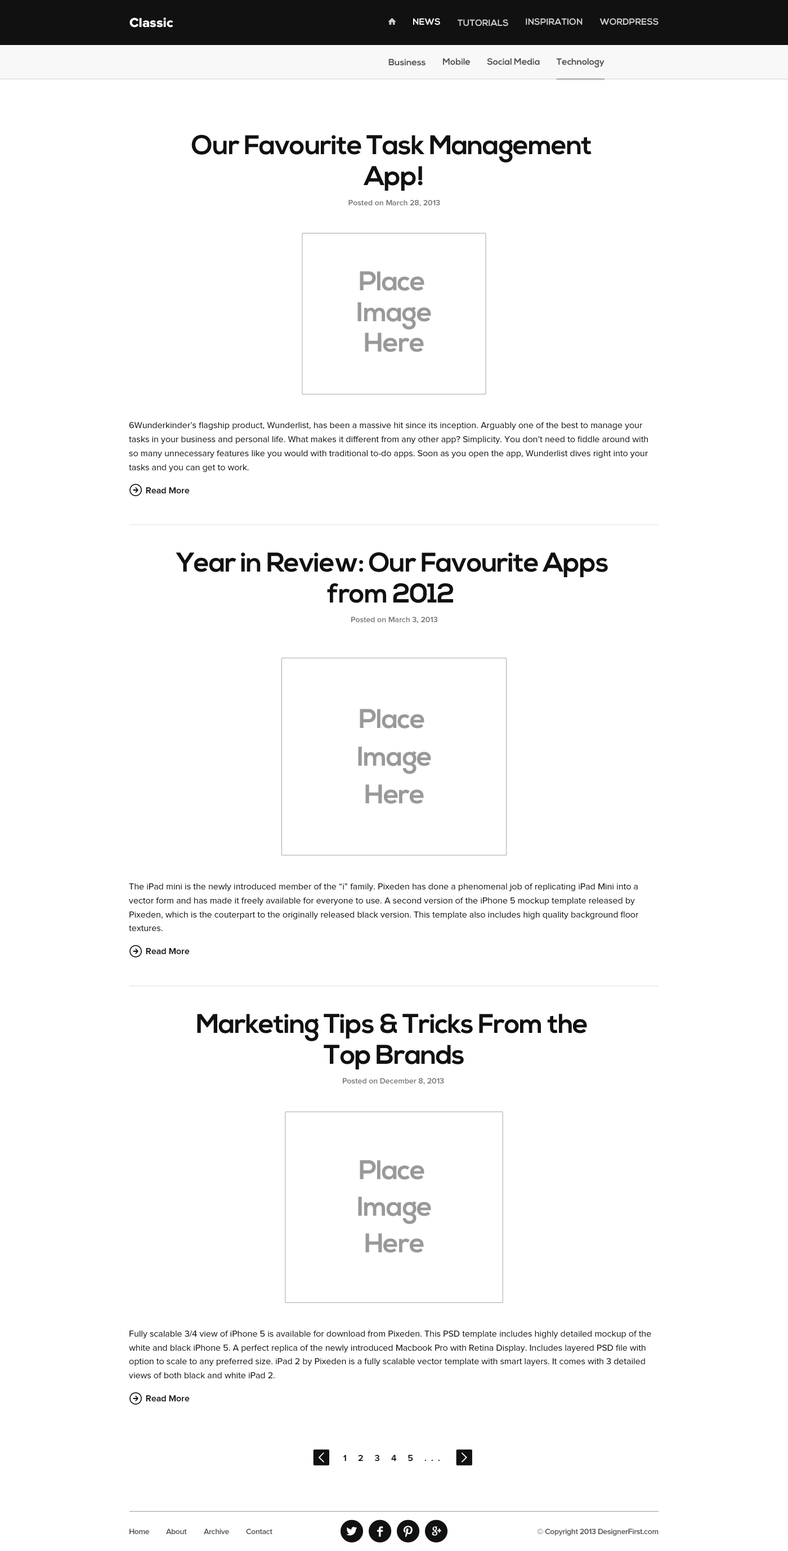
<style>
.page{position:relative;width:788px;height:1551px;background:#ffffff}
.page>*{position:absolute;margin:0}
.t1{font:13.5px "ProximaNova-Extrabld";color:#ffffff}
.t2{font:9px "NexaBold";color:#ffffff;text-transform:uppercase}
.t3{font:9px "NexaBold";color:#cccccc;text-transform:uppercase}
.t4{font:9px "NexaBold";color:#555555}
.t5{font:27px/28.1px "NexaBold";letter-spacing:-0.025em;color:#111111}
.t6{font:7.9px "ProximaNova-Semibold";color:#777777}
.t7{font:9px/11.3px "ProximaNova-Regular";color:#111111}
.t8{font:9px "ProximaNova-Semibold";color:#111111}
.t9{font:9px/11.2px "ProximaNova-Regular";color:#111111}
.t10{font:9px "ProximaNova-Semibold";letter-spacing:0.5em;color:#111111}
.t11{font:7.9px "ProximaNova-Semibold";letter-spacing:-0.025em;color:#555555}
</style>
<div class="page">
<p class="t1" style="left:129px;top:17px;width:44px;height:11px">Classic</p>
<p class="t2" style="left:413px;top:18px;width:27px;height:7px">News</p>
<p class="t3" style="left:457px;top:19px;width:51px;height:7px">tutorials</p>
<p class="t3" style="left:525px;top:18px;width:57px;height:7px">inspiration</p>
<p class="t3" style="left:599px;top:18px;width:59px;height:7px">Wordpress</p>
<p class="t4" style="left:388px;top:59px;width:37px;height:7px">Business</p>
<p class="t4" style="left:443px;top:58px;width:27px;height:7px">Mobile</p>
<p class="t4" style="left:487px;top:58px;width:52px;height:7px">Social Media</p>
<p class="t4" style="left:556px;top:58px;width:48px;height:10px">Technology</p>
<p class="t5" style="left:191px;top:134px;width:400px;height:57px;text-align:center">Our Favourite Task Management <br>App!</p>
<p class="t6" style="left:348px;top:200px;width:92px;height:6px">Posted on March 28, 2013</p>
<p class="t7" style="left:129px;top:422px;width:518px;height:50px">6Wunderkinder’s flagship product, Wunderlist, has been a massive hit since its inception. Arguably one of the best to manage your <br>tasks in your business and personal life. What makes it different from any other app? Simplicity. You don’t need to fiddle around with <br>so many unnecessary features like you would with traditional to-do apps. Soon as you open the app, Wunderlist dives right into your <br>tasks and you can get to work.</p>
<p class="t8" style="left:146px;top:487px;width:44px;height:6px">Read More</p>
<p class="t5" style="left:176px;top:552px;width:432px;height:51px;text-align:center">Year in Review: Our Favourite Apps <br>from 2012</p>
<p class="t6" style="left:351px;top:617px;width:87px;height:6px">Posted on March 3, 2013</p>
<p class="t9" style="left:129px;top:883px;width:509px;height:48px">The iPad mini is the newly introduced member of the “i” family. Pixeden has done a phenomenal job of replicating iPad Mini into a <br>vector form and has made it freely available for everyone to use. A second version of the iPhone 5 mockup template released by <br>Pixeden, which is the couterpart to the originally released black version. This template also includes high quality background floor <br>textures.</p>
<p class="t8" style="left:146px;top:948px;width:44px;height:6px">Read More</p>
<p class="t5" style="left:197px;top:1013px;width:390px;height:56px;text-align:center">Marketing Tips &amp; Tricks From the <br>Top Brands</p>
<p class="t6" style="left:343px;top:1078px;width:101px;height:7px">Posted on December 8, 2013</p>
<p class="t9" style="left:129px;top:1330px;width:522px;height:48px">Fully scalable 3/4 view of iPhone 5 is available for download from Pixeden. This PSD template includes highly detailed mockup of the <br>white and black iPhone 5. A perfect replica of the newly introduced Macbook Pro with Retina Display. Includes layered PSD file with <br>option to scale to any preferred size. iPad 2 by Pixeden is a fully scalable vector template with smart layers. It comes with 3 detailed <br>views of both black and white iPad 2.</p>
<p class="t8" style="left:146px;top:1395px;width:44px;height:6px">Read More</p>
<p class="t10" style="left:343px;top:1455px;width:96px;height:6px">1 2 3 4 5 ...</p>
<p class="t11" style="left:129px;top:1528px;width:20px;height:6px">Home</p>
<p class="t11" style="left:166px;top:1528px;width:21px;height:6px">About</p>
<p class="t11" style="left:204px;top:1528px;width:25px;height:6px">Archive</p>
<p class="t11" style="left:246px;top:1528px;width:26px;height:6px">Contact</p>
<p class="t11" style="left:537px;top:1528px;width:121px;height:8px">© Copyright 2013 DesignerFirst.com</p>
</div>
